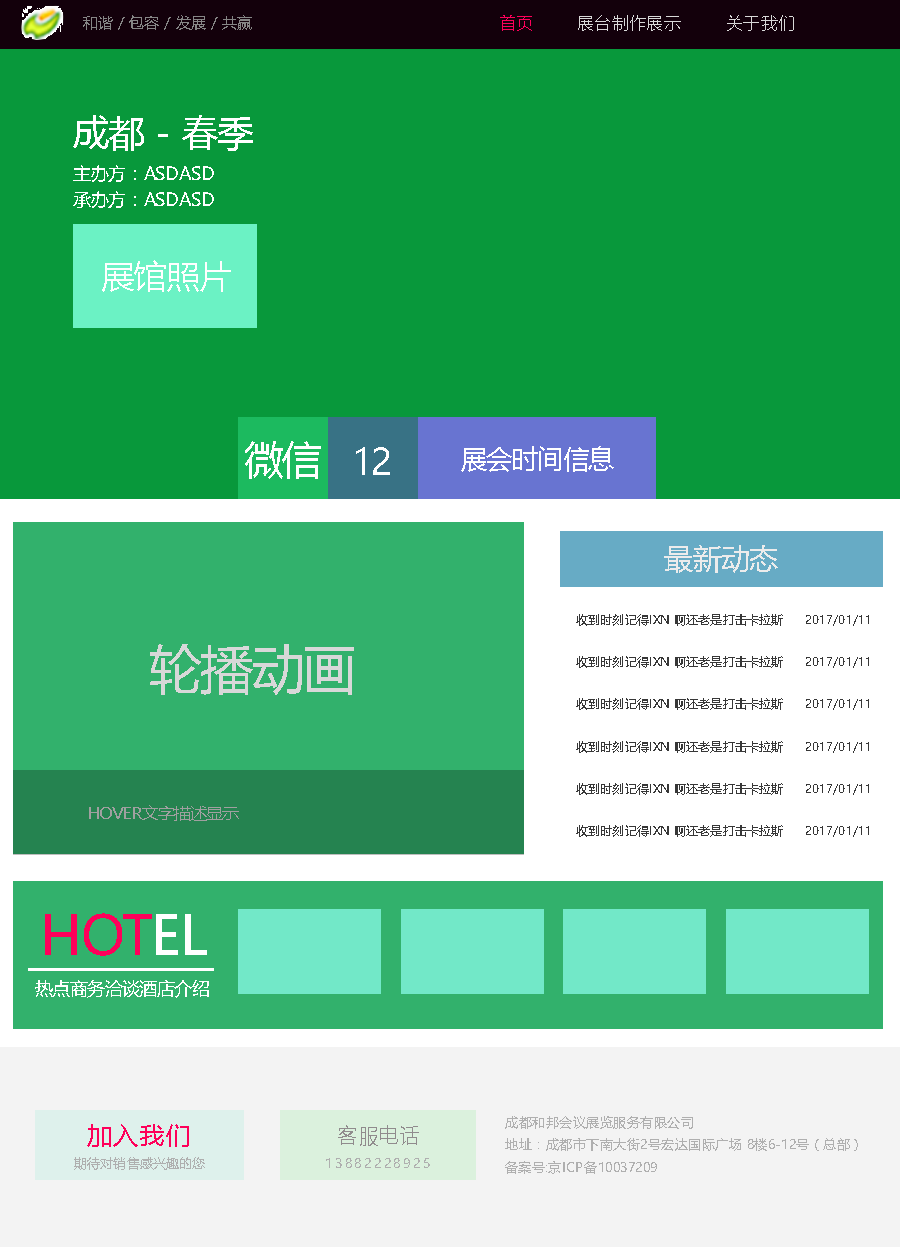
<style>
.page{position:relative;width:900px;height:1250px;background:#08983b}
.page>*{position:absolute;margin:0}
.t1{font:15.3px "MicrosoftYaHei";color:#868686;text-transform:uppercase}
.t2{font:16.7px "MicrosoftYaHeiLight";color:#fe005a}
.t3{font:16.7px "MicrosoftYaHeiLight";color:#d8d8d8}
.t4{font:36.8px "MicrosoftYaHei";color:#ffffff;text-transform:uppercase}
.t5{font:18px "MicrosoftYaHei";color:#ffffff;text-transform:uppercase}
.t6{font:33.2px "MicrosoftYaHei";color:#ffffff;text-transform:uppercase}
.t7{font:39.5px "MicrosoftYaHei";color:#ffffff;text-transform:uppercase}
.t8{font:27px "MicrosoftYaHei";color:#ffffff;text-transform:uppercase}
.t9{font:29.2px "MicrosoftYaHei";color:#ececec;text-transform:uppercase}
.t10{font:11.7px "MicrosoftYaHei";color:#373737;text-transform:uppercase}
.t11{font:53px "MicrosoftYaHei";color:#d8d8d8;text-transform:uppercase}
.t12{font:16.2px "MicrosoftYaHei";color:#a0a0a0;text-transform:uppercase}
.t13{font:53.9px "MicrosoftYaHei";color:#fe005a;text-transform:uppercase}
.t14{font:53.9px "MicrosoftYaHei";color:#ffffff;text-transform:uppercase}
.t15{font:12.6px "MicrosoftYaHei";color:#afafaf;text-transform:uppercase;scale:1.03 1}
.t16{font:25.5px "MicrosoftYaHei";letter-spacing:0.05em;color:#fe005a;text-transform:uppercase}
.t17{font:20.7px "MicrosoftYaHei";letter-spacing:0.05em;color:#908b8d;text-transform:uppercase}
.t18{font:13.1px "MicrosoftYaHei";letter-spacing:0.025em;color:#afafaf;text-transform:uppercase}
.t19{font:13.1px "MicrosoftYaHei";letter-spacing:0.2em;color:#afafaf;text-transform:uppercase}
</style>
<div class="page">
<p class="t1" style="left:83px;top:15px;width:169px;height:15px">和谐 / 包容 / 发展 / 共赢</p>
<p class="t2" style="left:500px;top:15px;width:32px;height:16px">首页</p>
<p class="t3" style="left:578px;top:15px;width:103px;height:16px">展台制作展示</p>
<p class="t3" style="left:727px;top:15px;width:67px;height:16px">关于我们</p>
<p class="t4" style="left:73px;top:115px;width:180px;height:36px">成都 - 春季</p>
<p class="t5" style="left:73px;top:165px;width:141px;height:17px">主办方：asdasd</p>
<p class="t5" style="left:73px;top:191px;width:141px;height:17px">承办方：asdasd</p>
<p class="t6" style="left:102px;top:260px;width:129px;height:32px">展馆照片</p>
<p class="t7" style="left:245px;top:441px;width:76px;height:38px">微信</p>
<p class="t4" style="left:356px;top:447px;width:34px;height:28px">12</p>
<p class="t8" style="left:461px;top:446px;width:153px;height:26px">展会时间信息</p>
<p class="t9" style="left:664px;top:545px;width:114px;height:28px">最新动态</p>
<p class="t10" style="left:576px;top:614px;width:293px;height:12px">收到时刻记得ixn 啊还老是打击卡拉斯      2017/01/11</p>
<p class="t11" style="left:150px;top:644px;width:204px;height:51px">轮播动画</p>
<p class="t10" style="left:576px;top:656px;width:293px;height:12px">收到时刻记得ixn 啊还老是打击卡拉斯      2017/01/11</p>
<p class="t10" style="left:576px;top:698px;width:293px;height:12px">收到时刻记得ixn 啊还老是打击卡拉斯      2017/01/11</p>
<p class="t10" style="left:576px;top:741px;width:293px;height:12px">收到时刻记得ixn 啊还老是打击卡拉斯      2017/01/11</p>
<p class="t10" style="left:576px;top:783px;width:293px;height:12px">收到时刻记得ixn 啊还老是打击卡拉斯      2017/01/11</p>
<p class="t12" style="left:89px;top:805px;width:150px;height:16px">hover文字描述显示</p>
<p class="t10" style="left:576px;top:825px;width:293px;height:12px">收到时刻记得ixn 啊还老是打击卡拉斯      2017/01/11</p>
<p class="t13" style="left:45px;top:913px;width:162px;height:43px">HOT<span class="t14">el</span></p>
<p class="t5" style="left:35px;top:980px;width:174px;height:18px">热点商务洽谈酒店介绍</p>
<p class="t15" style="left:505px;top:1116px;width:188px;height:13px">成都和邦会议展览服务有限公司</p>
<p class="t16" style="left:87px;top:1124px;width:102px;height:23px">加入我们</p>
<p class="t17" style="left:338px;top:1125px;width:81px;height:21px">客服电话</p>
<p class="t15" style="left:505px;top:1138px;width:353px;height:13px">地址：成都市下南大街2号宏达国际广场 8楼6-12号（总部）</p>
<p class="t18" style="left:74px;top:1157px;width:131px;height:13px">期待对销售感兴趣的您</p>
<p class="t19" style="left:326px;top:1158px;width:104px;height:10px">13882228925</p>
<p class="t15" style="left:505px;top:1161px;width:152px;height:13px">备案号:京ICP备10037209</p>
</div>
